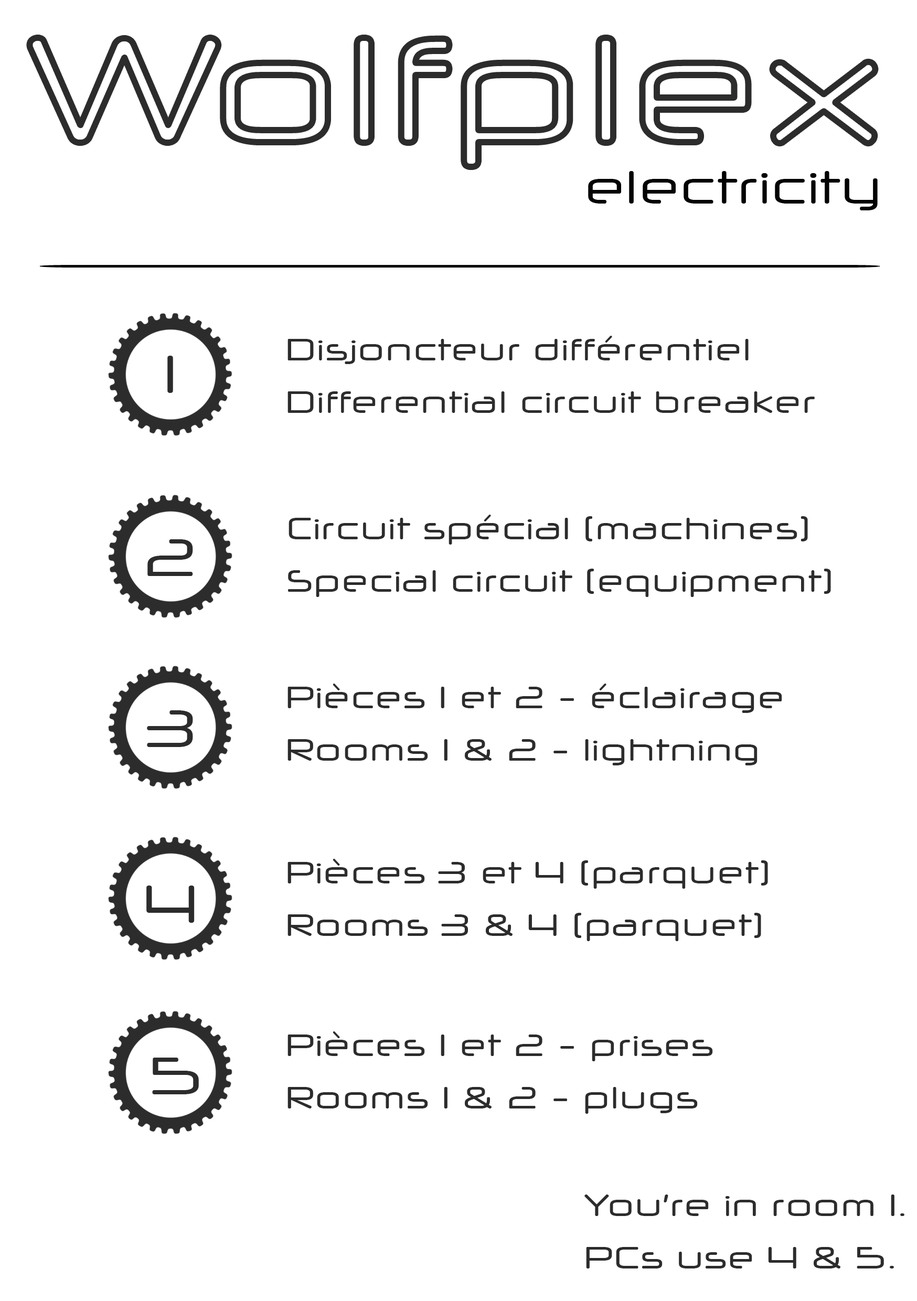
<style>
.page{position:relative;width:917px;height:1301px;background:#ffffff}
.page>*{position:absolute;margin:0}
.t1{font:45.9px "NeuropolXFree";letter-spacing:-0.005em;color:#030303}
.t2{font:30.6px/52.4px "NeuropolXFree";color:#2d2c2d}
.t3{font:52.4px "NeuropolXFree";color:#2d2c2d}
</style>
<div class="page">
<p class="t1" style="left:588px;top:171px;width:289px;height:39px">electricity</p>
<p class="t2" style="left:287px;top:336px;width:528px;height:77px">Disjoncteur différentiel<br>Differential circuit breaker</p>
<p class="t3" style="left:167px;top:356px;width:6px;height:37px">1</p>
<p class="t2" style="left:288px;top:515px;width:543px;height:82px">Circuit spécial (machines)<br>Special circuit (equipment)</p>
<p class="t3" style="left:147px;top:539px;width:46px;height:37px">2</p>
<p class="t2" style="left:287px;top:683px;width:495px;height:82px">Pièces 1 et 2 - éclairage<br>Rooms 1 &amp; 2 - lightning</p>
<p class="t3" style="left:147px;top:710px;width:46px;height:37px">3</p>
<p class="t2" style="left:287px;top:859px;width:481px;height:82px">Pièces 3 et 4 (parquet)<br>Rooms 3 &amp; 4 (parquet)</p>
<p class="t3" style="left:146px;top:885px;width:49px;height:38px">4</p>
<p class="t2" style="left:287px;top:1031px;width:426px;height:82px">Pièces 1 et 2 - prises<br>Rooms 1 &amp; 2 - plugs</p>
<p class="t3" style="left:152px;top:1057px;width:47px;height:37px">5</p>
<p class="t2" style="left:584px;top:1194px;width:320px;height:74px">You’re in room 1.<br>PCs use 4 &amp; 5.</p>
</div>
